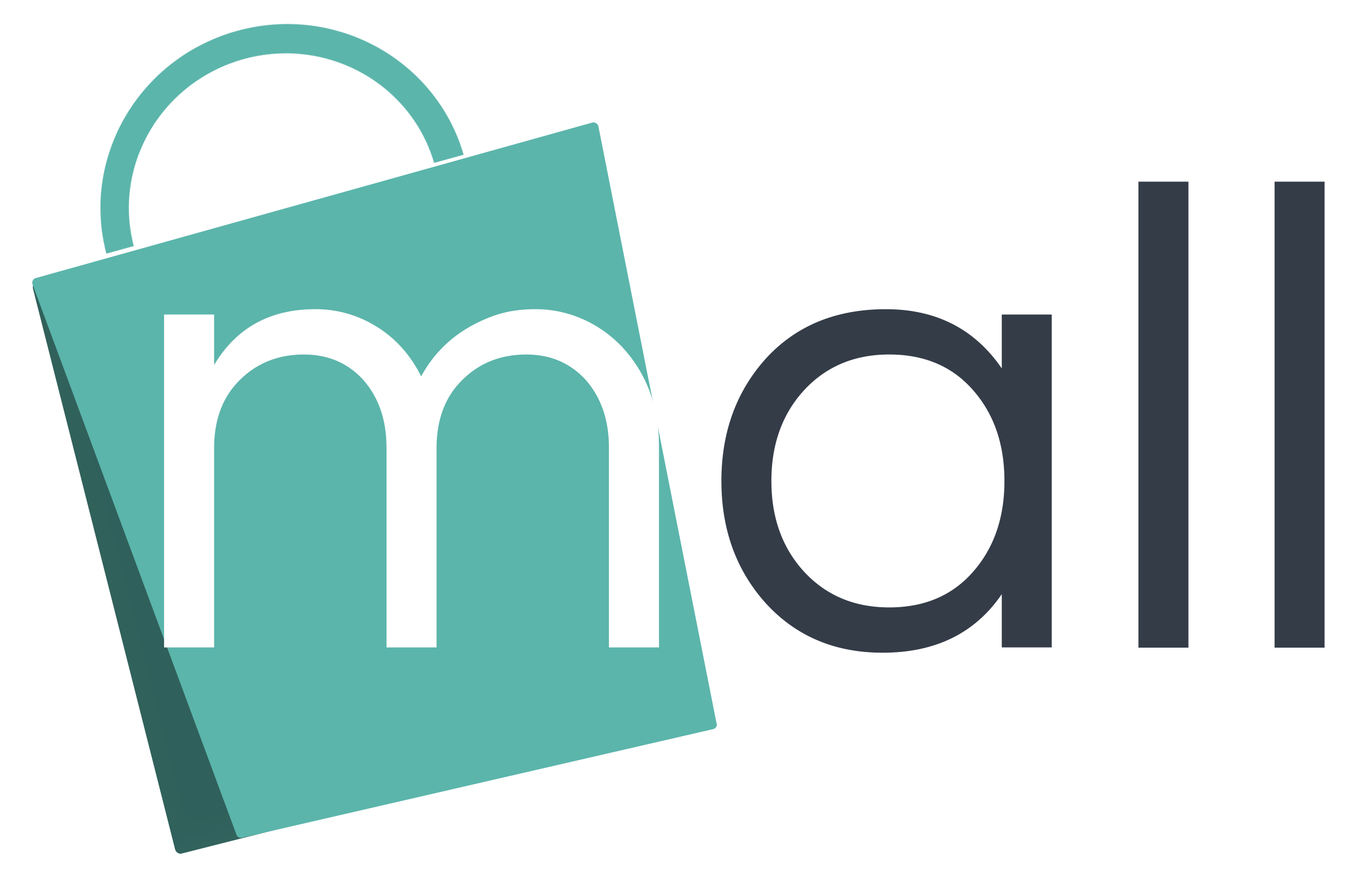
<style>
.page{position:relative;width:1362px;height:875px;background:#ffffff}
.page>*{position:absolute;margin:0}
.t1{font:665.9px "Questrial-Regular";color:#343c48}
.t2{font:665.9px "Questrial-Regular";color:#ffffff}
</style>
<div class="page">
<p class="t1" style="left:164px;top:182px;width:1161px;height:471px"><span class="t2">m</span>all</p>
</div>
